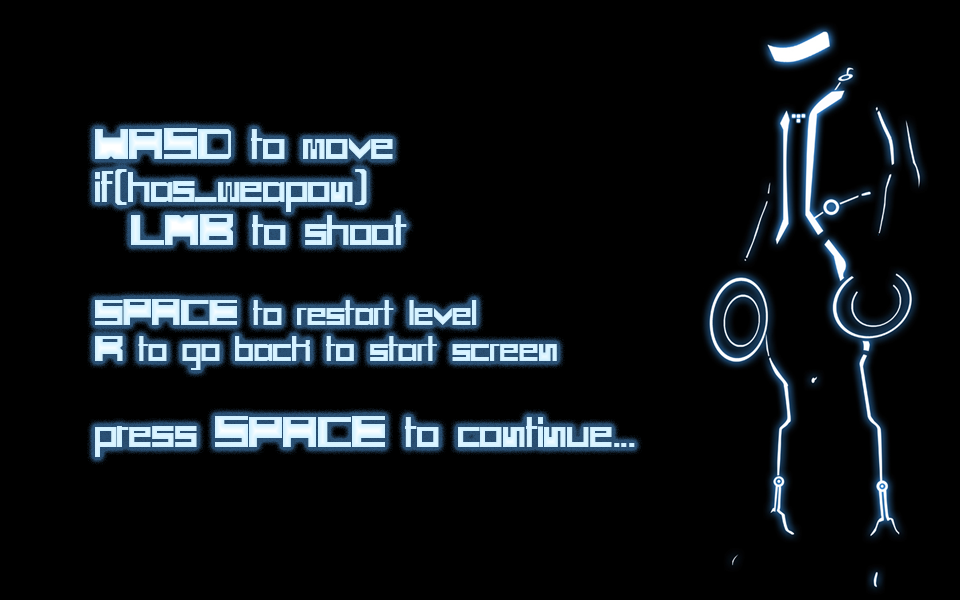
<style>
.page{position:relative;width:960px;height:600px;background:#000000}
.page>*{position:absolute;margin:0}
.t1{font:30px "SCIFIBOX";color:#d5f2ff}
.t2{font:36px "SCIFIBOX";color:#d5f2ff}
</style>
<div class="page">
<p class="t1" style="left:95px;top:128px;width:540px;height:329px"><span class="t2">WASD to move<br>if(has_weapon)<br> LMB to shoot<br><br></span>SPACE to restart level<br>R to go back to start screen<br><span class="t2"><br>press SPACE to continue...</span></p>
</div>
